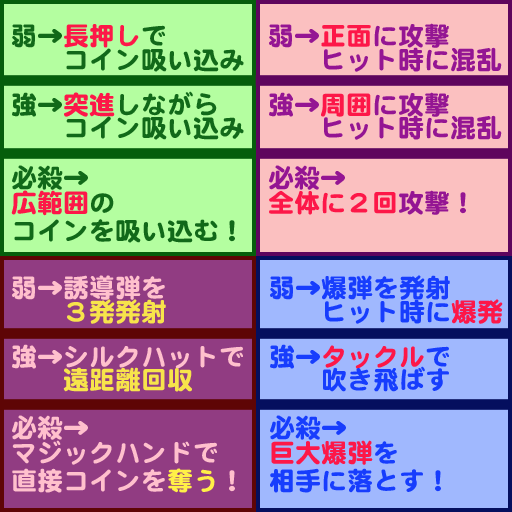
<style>
.page{position:relative;width:512px;height:512px}
.page>*{position:absolute;margin:0}
.t1{font:26px/25.1px "DFMaruGothic_U-SB-WIN-RKSJ-H";color:#116919}
.t2{font:26px/24.1px "DFMaruGothic_U-SB-WIN-RKSJ-H";color:#116919}
.t3{font:26px/24.1px "DFMaruGothic_U-SB-WIN-RKSJ-H";color:#fd1748}
.t4{font:26px/23.1px "DFMaruGothic_U-SB-WIN-RKSJ-H";color:#116919}
.t5{font:26px/23.1px "DFMaruGothic_U-SB-WIN-RKSJ-H";color:#fd1748}
.t6{font:26px/28.1px "DFMaruGothic_U-SB-WIN-RKSJ-H";color:#fd1748}
.t7{font:26px/28.1px "DFMaruGothic_U-SB-WIN-RKSJ-H";color:#116919}
.t8{font:26px/24.1px "DFMaruGothic_U-SB-WIN-RKSJ-H";color:#941593}
.t9{font:26px/23.1px "DFMaruGothic_U-SB-WIN-RKSJ-H";color:#941593}
.t10{font:26px/25.1px "DFMaruGothic_U-SB-WIN-RKSJ-H";color:#941593}
.t11{font:26px/28.1px "DFMaruGothic_U-SB-WIN-RKSJ-H";color:#941593}
.t12{font:26px/28.1px "DFMaruGothic_U-SB-WIN-RKSJ-H";color:#ffc0cd}
.t13{font:26px/24.1px "DFMaruGothic_U-SB-WIN-RKSJ-H";color:#ffc0cd}
.t14{font:26px/24.1px "DFMaruGothic_U-SB-WIN-RKSJ-H";color:#f7e44b}
.t15{font:26px/23.1px "DFMaruGothic_U-SB-WIN-RKSJ-H";color:#ffc0cd}
.t16{font:26px/23.1px "DFMaruGothic_U-SB-WIN-RKSJ-H";color:#f7e44b}
.t17{font:26px/25.1px "DFMaruGothic_U-SB-WIN-RKSJ-H";color:#ffc0cd}
.t18{font:26px/28.1px "DFMaruGothic_U-SB-WIN-RKSJ-H";color:#fff047}
.t19{font:26px/24.1px "DFMaruGothic_U-SB-WIN-RKSJ-H";color:#173dfd}
.t20{font:26px/23.1px "DFMaruGothic_U-SB-WIN-RKSJ-H";color:#173dfd}
.t21{font:26px/25.1px "DFMaruGothic_U-SB-WIN-RKSJ-H";color:#173dfd}
.t22{font:26px/28.1px "DFMaruGothic_U-SB-WIN-RKSJ-H";color:#173dfd}
</style>
<div class="page">
<p class="t1" style="left:11px;top:24px;width:233px;height:219px"><span class="t2">弱→</span><span class="t3">長押し</span><span class="t2">で<br>　　コイン吸い込み<br><br></span><span class="t4">強→</span><span class="t5">突進</span><span class="t4">しながら<br></span>　　コイン吸い込み<br><br>必殺→<br><span class="t6">広範囲</span><span class="t7">の<br></span>コインを吸い込む！</p>
<p class="t8" style="left:269px;top:23px;width:233px;height:192px">弱→<span class="t3">正面</span>に攻撃<br>　　ヒット時に混乱<br><br><span class="t9">強→</span><span class="t5">周囲</span><span class="t9">に攻撃<br></span><span class="t10">　　ヒット時に混乱<br><br>必殺→<br></span><span class="t6">全体に２回</span><span class="t11">攻撃！</span></p>
<p class="t12" style="left:12px;top:275px;width:231px;height:218px"><span class="t13">弱→誘導弾を<br>　　</span><span class="t14">３発発射<br><br></span><span class="t15">強→シルクハットで<br>　　</span><span class="t16">遠距離回収<br></span><span class="t17"><br>必殺→<br></span>マジックハンドで<br>直接コインを<span class="t18">奪う</span>！</p>
<p class="t19" style="left:270px;top:275px;width:233px;height:218px">弱→爆弾を発射<br>　　ヒット時に<span class="t3">爆発<br><br></span><span class="t20">強→</span><span class="t5">タックル</span><span class="t20">で<br>　　吹き飛ばす<br></span><span class="t21"><br>必殺→<br></span><span class="t6">巨大爆弾</span><span class="t22">を<br>相手に落とす！</span></p>
</div>
